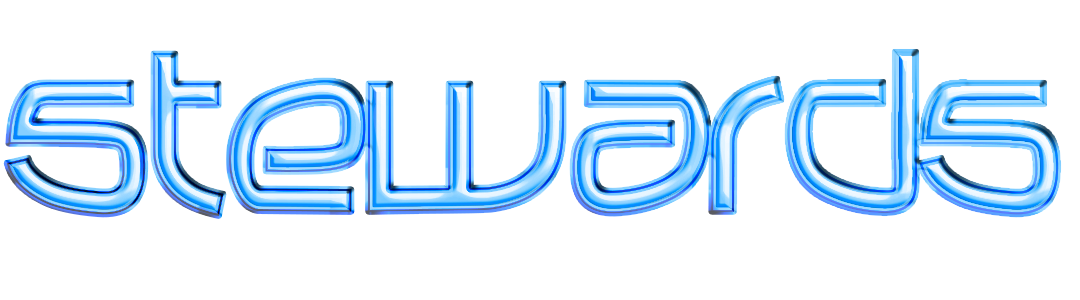
<style>
.page{position:relative;width:1080px;height:300px;background:#ffffff}
.page>*{position:absolute;margin:0}
.t1{font:272.7px "MANABU";letter-spacing:-0.035em}
</style>
<div class="page">
<p class="t1" style="left:6px;top:51px;width:1053px;height:165px">Stewards</p>
</div>
